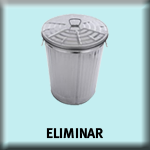
<style>
.page{position:relative;width:150px;height:150px;background:#c4eef1}
.page>*{position:absolute;margin:0}
.t1{font:14px "MetaBoldLF-Roman";color:#000000}
</style>
<div class="page">
<p class="t1" style="left:46px;top:128px;width:57px;height:11px">ELIMINAR</p>
</div>
